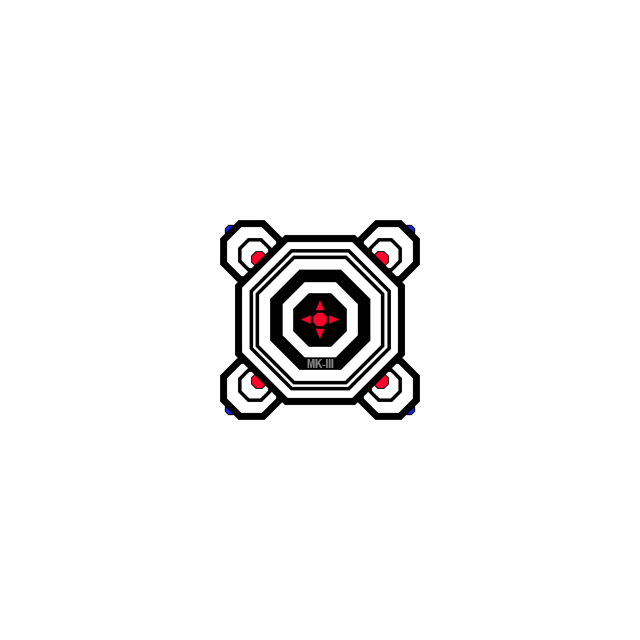
<style>
.page{position:relative;width:640px;height:640px;background:#ffffff}
.page>*{position:absolute;margin:0}
.t1{font:12px "ArialNarrow-Bold";color:#818181}
</style>
<div class="page">
<p class="t1" style="left:307px;top:359px;width:27px;height:9px">MK-III</p>
</div>
